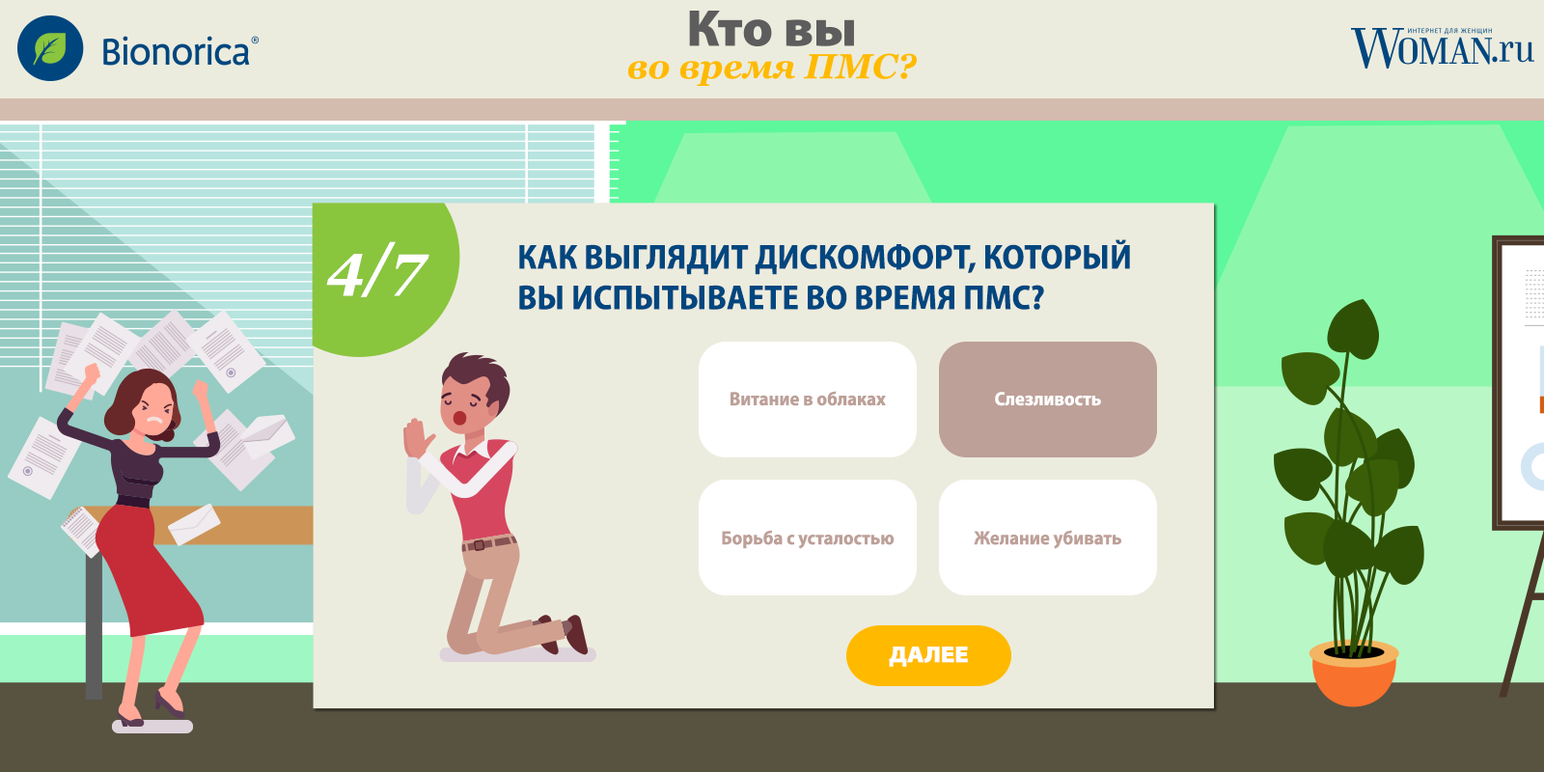
<style>
.page{position:relative;width:1544px;height:772px;background:#ececde}
.page>*{position:absolute;margin:0}
.t1{font:57.9px "Georgia-BoldItalic";color:#ffffff}
.t2{font:34.7px/40.5px "MyriadPro-BoldSemiCn";color:#00467f;text-transform:uppercase}
.t3{font:19.3px "MyriadPro-BoldSemiCn";color:#bda098}
.t4{font:19.3px "MyriadPro-BoldSemiCn";color:#ffffff}
.t5{font:23.2px "MyriadPro-BlackSemiExt";color:#ffffff;text-transform:uppercase}
</style>
<div class="page">
<p class="t1" style="left:326px;top:241px;width:104px;height:56px">4/7</p>
<p class="t2" style="left:519px;top:239px;width:611px;height:71px">Как выглядит дискомфорт, который <br>вы испытываете во время ПМС?</p>
<p class="t3" style="left:731px;top:391px;width:155px;height:15px">Витание в облаках</p>
<p class="t4" style="left:995px;top:392px;width:106px;height:14px">Слезливость</p>
<p class="t3" style="left:722px;top:530px;width:173px;height:19px">Борьба с усталостью</p>
<p class="t3" style="left:974px;top:530px;width:148px;height:19px">Желание убивать</p>
<p class="t5" style="left:889px;top:647px;width:79px;height:20px">далее</p>
</div>
